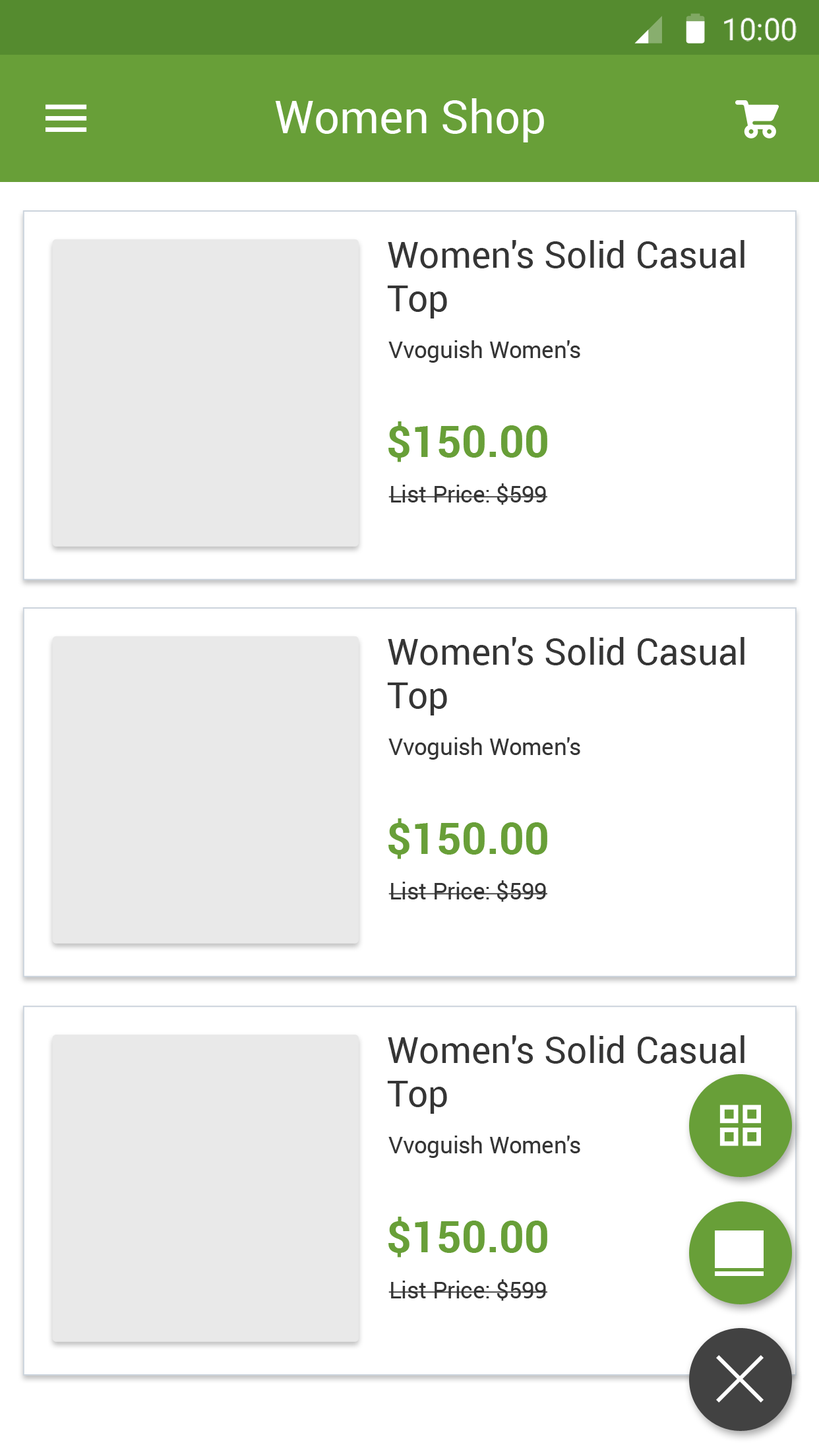
<style>
.page{position:relative;width:819px;height:1456px;background:#ffffff}
.page>*{position:absolute;margin:0}
.t1{font:30.3px "Roboto-Regular";color:#ffffff}
.t2{font:45.5px "Roboto-Regular";color:#ffffff}
.t3{font:36.4px "Roboto-Regular";color:#353535}
.t4{font:22.7px "Roboto-Regular";color:#353535}
.t5{font:43.5px "Roboto-Bold";color:#689f38}
</style>
<div class="page">
<p class="t1" style="left:724px;top:18px;width:73px;height:24px">10:00</p>
<p class="t2" style="left:275px;top:98px;width:269px;height:44px">Women Shop</p>
<p class="t3" style="left:387px;top:240px;width:357px;height:78px">Women's Solid Casual<br>Top</p>
<p class="t4" style="left:388px;top:340px;width:192px;height:23px">Vvoguish Women's</p>
<p class="t5" style="left:388px;top:421px;width:159px;height:41px">$150.00</p>
<p class="t4" style="left:388px;top:483px;width:159px;height:22px">List Price: $599</p>
<p class="t3" style="left:387px;top:637px;width:357px;height:78px">Women's Solid Casual<br>Top</p>
<p class="t4" style="left:388px;top:737px;width:192px;height:23px">Vvoguish Women's</p>
<p class="t5" style="left:388px;top:818px;width:159px;height:41px">$150.00</p>
<p class="t4" style="left:388px;top:880px;width:159px;height:22px">List Price: $599</p>
<p class="t3" style="left:387px;top:1035px;width:357px;height:79px">Women's Solid Casual<br>Top</p>
<p class="t4" style="left:388px;top:1136px;width:192px;height:22px">Vvoguish Women's</p>
<p class="t5" style="left:388px;top:1217px;width:159px;height:40px">$150.00</p>
<p class="t4" style="left:388px;top:1279px;width:159px;height:22px">List Price: $599</p>
</div>
